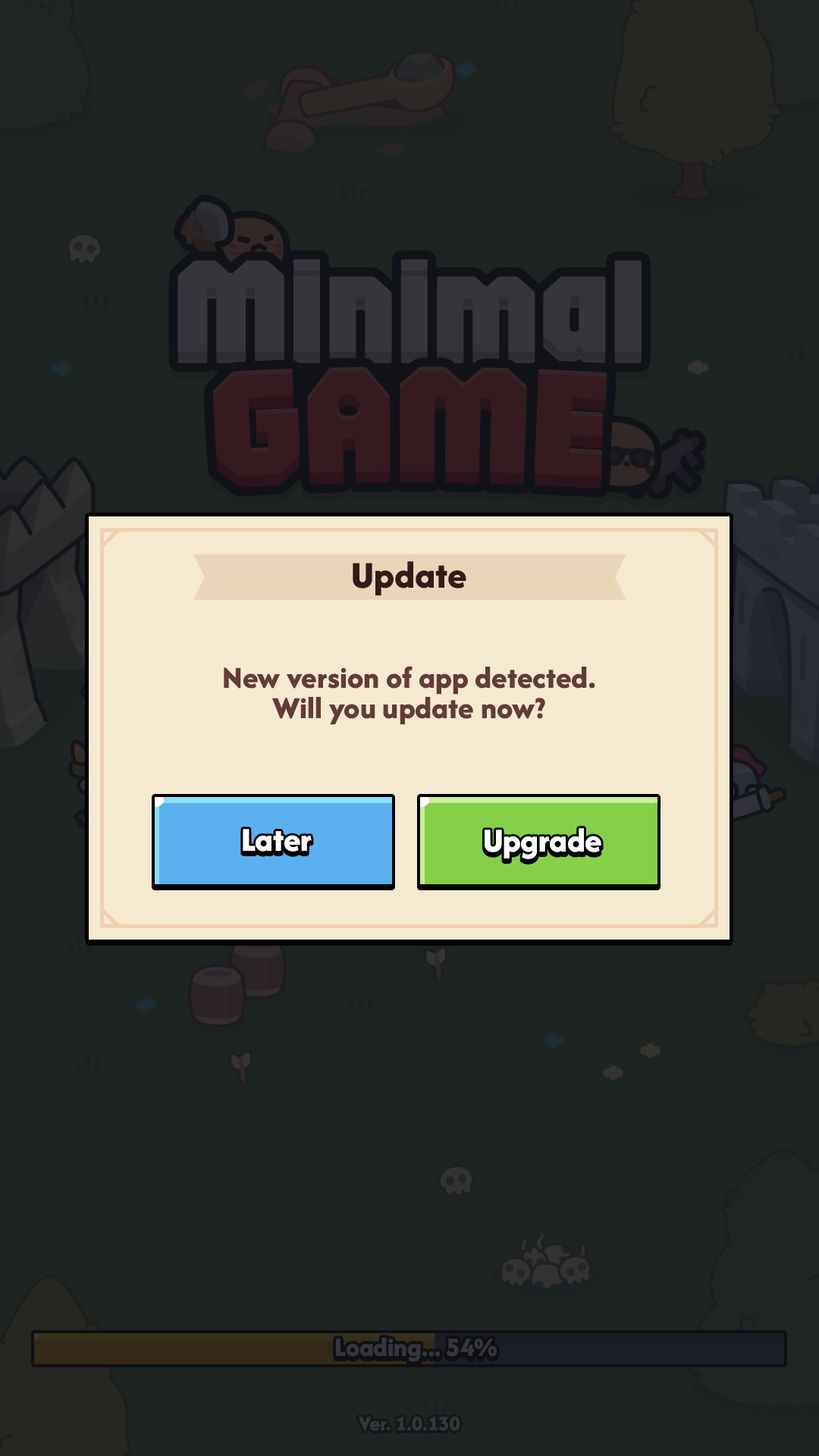
<style>
.page{position:relative;width:819px;height:1456px;background:#1e2422}
.page>*{position:absolute;margin:0}
.t1{font:39.4px "AfacadFlux-ExtraBold";color:#341b19}
.t2{font:31.8px/30.3px "AfacadFlux-ExtraBold";color:#633b37}
.t3{font:34.9px "AfacadFlux-ExtraBold";color:#ffffff}
</style>
<div class="page">
<p class="t1" style="left:353px;top:561px;width:113px;height:35px">Update</p>
<p class="t2" style="left:224px;top:666px;width:371px;height:59px;text-align:center">New version of app detected.<br>Will you update now?</p>
<p class="t3" style="left:243px;top:829px;width:69px;height:23px">Later</p>
<p class="t3" style="left:485px;top:828px;width:116px;height:31px">Upgrade</p>
</div>
